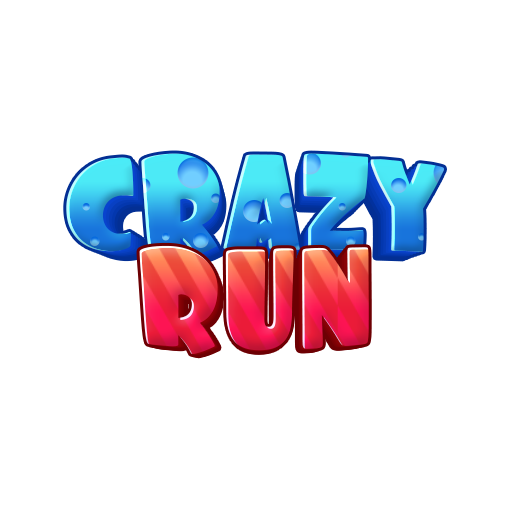
<style>
.page{position:relative;width:512px;height:512px;background:#ffffff}
.page>*{position:absolute;margin:0}
.t1{font:125px "Foo-Regular";letter-spacing:-0.01em}
.t2{font:137.5px "Foo-Regular";letter-spacing:-0.005em;scale:0.91 1}
.t3{font:134.8px "Foo-Regular";letter-spacing:-0.005em;scale:0.91 1}
.t4{font:132.1px "Foo-Regular";letter-spacing:-0.005em;scale:0.91 1}
.t5{font:129.4px "Foo-Regular";letter-spacing:-0.005em;scale:0.91 1}
.t6{font:126.8px "Foo-Regular";letter-spacing:-0.005em;scale:0.91 1}
</style>
<div class="page">
<p class="t1" style="left:66px;top:153px;width:378px;height:103px">CRAZY</p>
<p class="t2" style="left:139px;top:245px;width:230px;height:110px">RUN</p>
<p class="t3" style="left:141px;top:248px;width:226px;height:107px">RUN</p>
<p class="t4" style="left:144px;top:250px;width:221px;height:105px">RUN</p>
<p class="t5" style="left:146px;top:252px;width:216px;height:103px">RUN</p>
<p class="t6" style="left:148px;top:255px;width:212px;height:100px">RUN</p>
</div>
